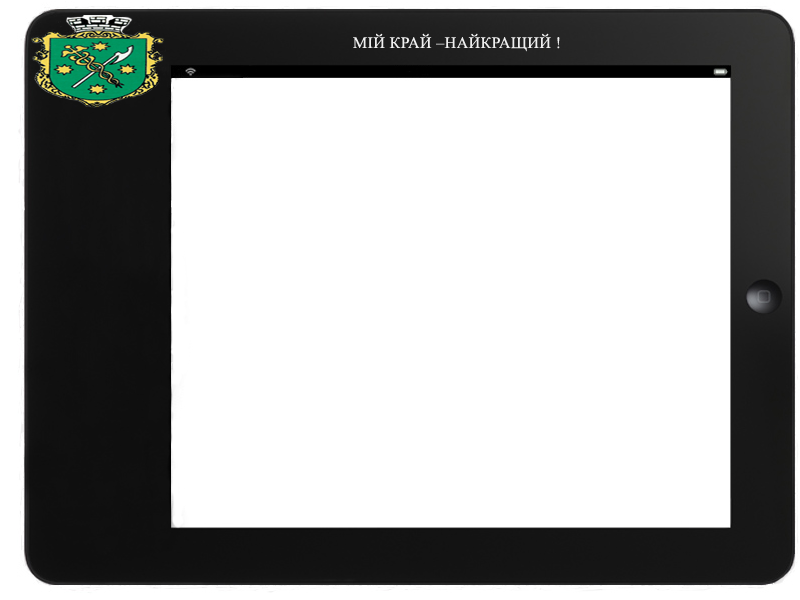
<style>
.page{position:relative;width:800px;height:600px;background:#ffffff}
.page>*{position:absolute;margin:0}
.t1{font:16px "TimesNewRomanPSMT";letter-spacing:0.025em;color:#f0f0f0;text-transform:uppercase}
</style>
<div class="page">
<p class="t1" style="left:353px;top:33px;width:207px;height:19px">МІЙ КРАЙ –НАЙКРАЩИЙ !</p>
</div>
